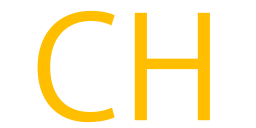
<style>
.page{position:relative;width:256px;height:128px;background:#ffffff}
.page>*{position:absolute;margin:0}
.t1{font:140.9px "KozGoPr6N-Regular";color:#ffbf00;font-weight:bold}
</style>
<div class="page">
<p class="t1" style="left:37px;top:10px;width:173px;height:113px">CH</p>
</div>
